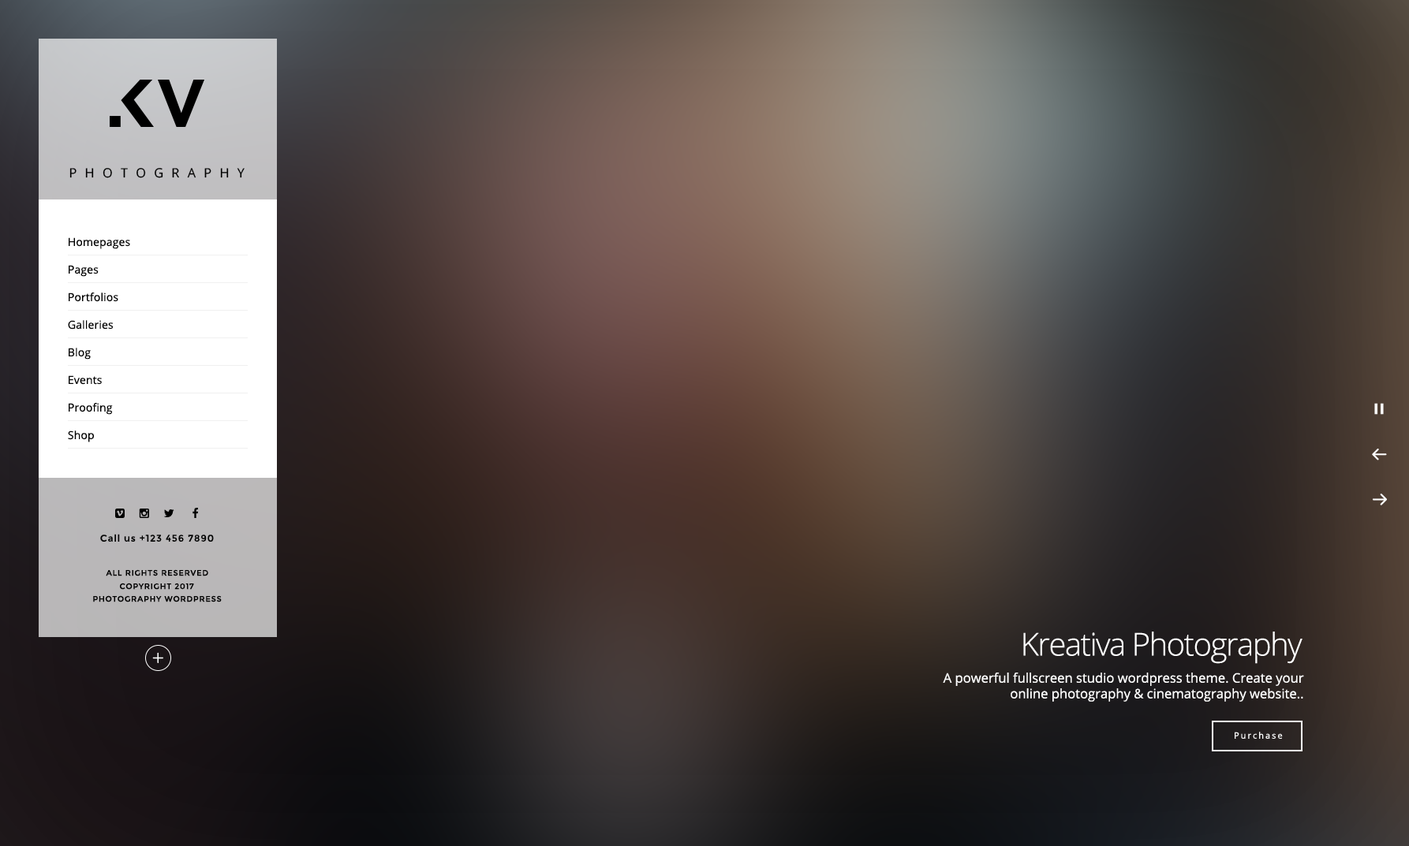
<style>
.page{position:relative;width:1409px;height:846px}
.page>*{position:absolute;margin:0}
.t1{font:12.9px "OpenSans";letter-spacing:0.635em;color:#000000}
.t2{font:11px/27.6px "OpenSans";letter-spacing:0.01em;color:#000000}
.t3{font:9.5px "Montserrat-Regular";letter-spacing:0.075em;color:#000000}
.t4{font:7.8px "Montserrat-Regular";letter-spacing:0.075em;color:#000000}
.t5{font:31.6px "OpenSans-Light";letter-spacing:-0.037em;color:#ffffff}
.t6{font:13.1px "OpenSans";color:#ffffff}
.t7{font:8.7px "OpenSans";letter-spacing:0.184em;color:#ffffff}
</style>
<div class="page">
<p class="t1" style="left:69px;top:168px;width:176px;height:10px">PHOTOGRAPHY</p>
<p class="t2" style="left:68px;top:237px;width:62px;height:206px">Homepages<br>Pages<br>Portfolios<br>Galleries<br>Blog<br>Events<br>Proofing<br>Shop</p>
<p class="t3" style="left:100px;top:534px;width:114px;height:8px">Call us +123 456 7890</p>
<p class="t4" style="left:106px;top:570px;width:102px;height:7px">ALL RIGHTS RESERVED</p>
<p class="t4" style="left:120px;top:583px;width:74px;height:7px">COPYRIGHT 2017</p>
<p class="t4" style="left:93px;top:596px;width:129px;height:7px">PHOTOGRAPHY WORDPRESS</p>
<p class="t5" style="left:1023px;top:632px;width:279px;height:32px">Kreativa Photography</p>
<p class="t6" style="left:943px;top:673px;width:361px;height:29px;text-align:right">A powerful fullscreen studio wordpress theme. Create your online photography &amp; cinematography website..</p>
<p class="t7" style="left:1234px;top:732px;width:49px;height:7px">Purchase</p>
</div>
